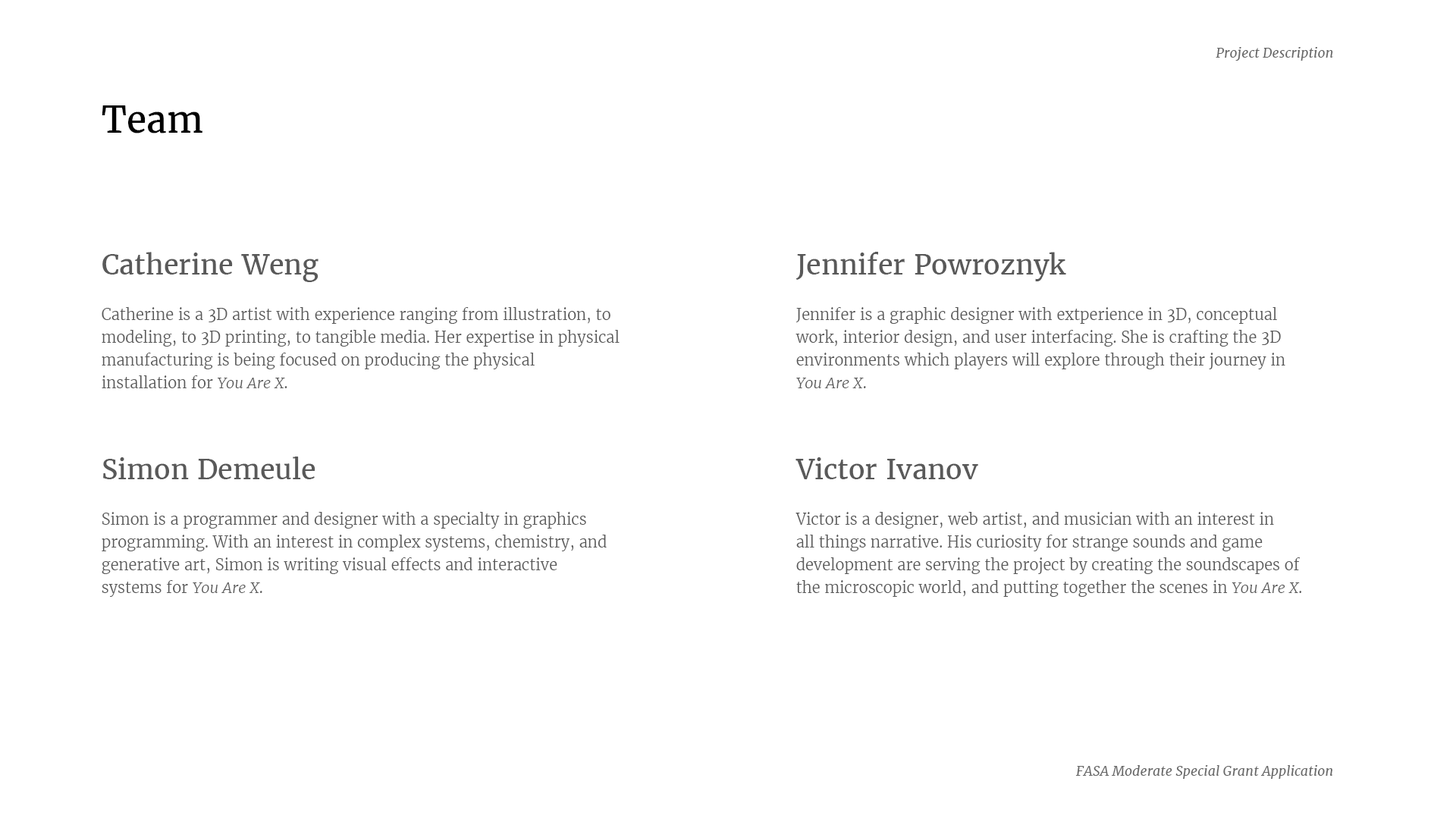
<style>
.page{position:relative;width:1456px;height:819px;background:#ffffff}
.page>*{position:absolute;margin:0}
.t1{font:13.6px "Merriweather-Italic";color:#686868}
.t2{font:36.4px "Merriweather-Regular";color:#000000}
.t3{font:15.2px/22.7px "Merriweather-Light";color:#595959}
.t4{font:27.3px/22.7px "Merriweather-Regular";color:#595959}
.t5{font:15.2px/22.7px "Merriweather-LightItalic";color:#595959}
</style>
<div class="page">
<p class="t1" style="left:1216px;top:47px;width:117px;height:14px">Project Description</p>
<p class="t2" style="left:102px;top:105px;width:100px;height:28px">Team</p>
<p class="t3" style="left:102px;top:252px;width:518px;height:136px"><span class="t4">Catherine Weng<br></span><br>Catherine is a 3D artist with experience ranging from illustration, to modeling, to 3D printing, to tangible media. Her expertise in physical manufacturing is being focused on producing the physical<br>installation for <span class="t5">You Are X</span>.</p>
<p class="t3" style="left:795px;top:252px;width:490px;height:136px"><span class="t4">Jennifer Powroznyk<br></span><br>Jennifer is a graphic designer with extperience in 3D, conceptual work, interior design, and user interfacing. She is crafting the 3D<br>environments which players will explore through their journey in<br><span class="t5">You Are X</span>.</p>
<p class="t3" style="left:102px;top:457px;width:505px;height:140px"><span class="t4">Simon Demeule<br></span><br>Simon is a programmer and designer with a specialty in graphics programming. With an interest in complex systems, chemistry, and generative art, Simon is writing visual effects and interactive<br>systems for <span class="t5">You Are X</span>.</p>
<p class="t3" style="left:795px;top:457px;width:506px;height:140px"><span class="t4">Victor Ivanov<br></span><br>Victor is a designer, web artist, and musician with an interest in<br>all things narrative. His curiosity for strange sounds and game<br>development are serving the project by creating the soundscapes of the microscopic world, and putting together the scenes in <span class="t5">You Are X</span>.</p>
<p class="t1" style="left:1075px;top:765px;width:258px;height:14px">FASA Moderate Special Grant Application</p>
</div>
